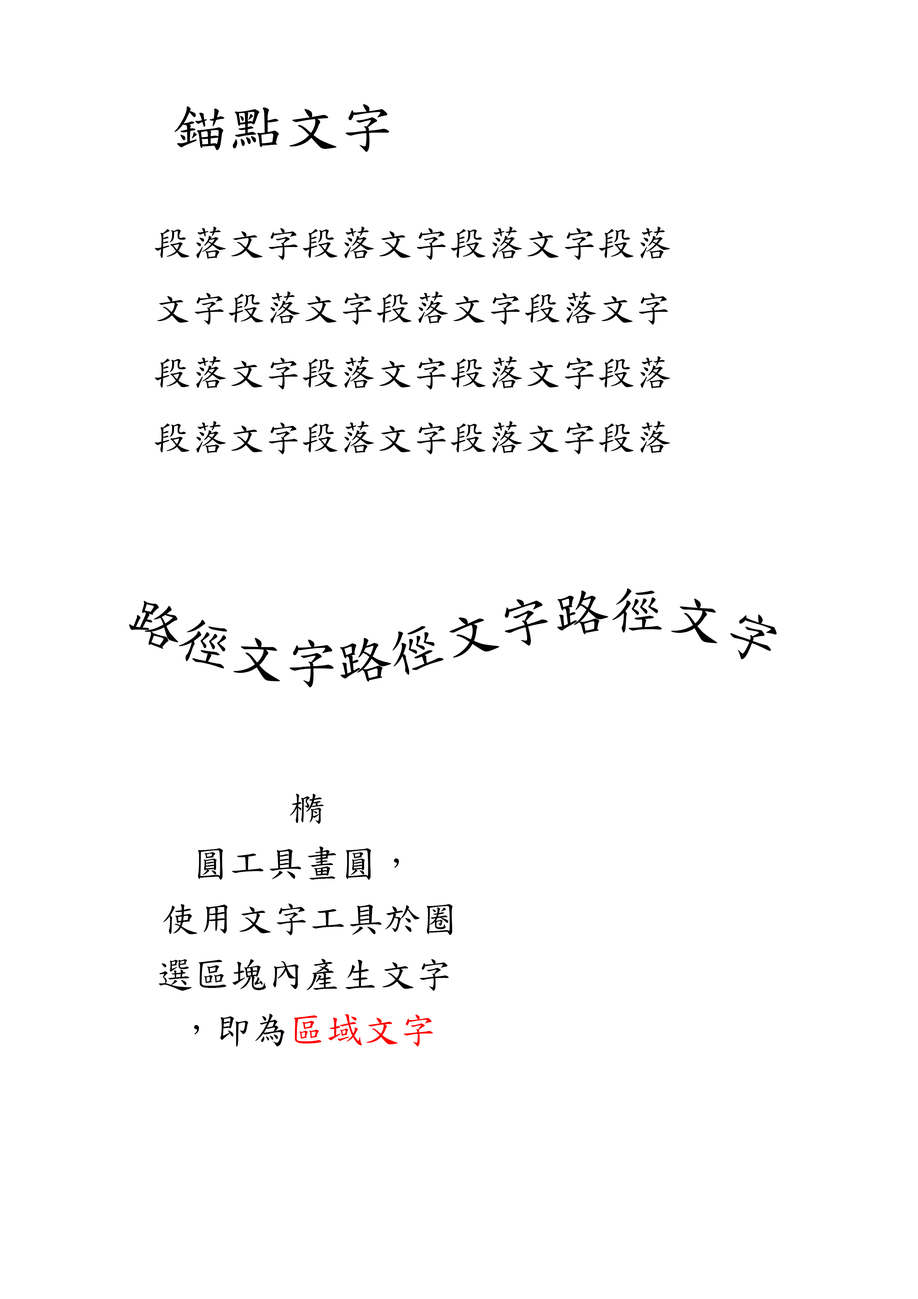
<style>
.page{position:relative;width:918px;height:1299px;background:#ffffff}
.page>*{position:absolute;margin:0}
.t1{font:55.5px "DFKaiShu-SB-Estd-BF";color:#000000}
.t2{font:37px "DFKaiShu-SB-Estd-BF";color:#000000}
.t3{font:37px/55.5px "DFKaiShu-SB-Estd-BF";color:#000000}
.t4{font:37px/55.5px "DFKaiShu-SB-Estd-BF";color:#ff0000}
</style>
<div class="page">
<p class="t1" style="left:174px;top:104px;width:215px;height:48px">錨點文字</p>
<p class="t2" style="left:155px;top:227px;width:515px;height:227px">段落文字段落文字段落文字段落文字段落文字段落文字段落文字段落文字段落文字段落文字段落段落文字段落文字段落文字段落<br><br>段落文字文字</p>
<p class="t1" style="left:129px;top:588px;width:648px;height:100px">路徑文字路徑文字路徑文字</p>
<p class="t3" style="left:159px;top:793px;width:294px;height:254px">橢圓工具畫圓，使用文字工具於圈選區塊內產生文字，即為<span class="t4">區域文字</span></p>
</div>
